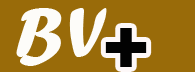
<style>
.page{position:relative;width:195px;height:72px;background:#996b09}
.page>*{position:absolute;margin:0}
.t1{font:72px "ForteMT";letter-spacing:0.083em;color:#fdfcf9}
.t2{font:72px "GillSans-UltraBold";letter-spacing:0.083em;color:#020202}
</style>
<div class="page">
<p class="t1" style="left:16px;top:8px;width:91px;height:58px">BV</p>
<p class="t2" style="left:105px;top:28px;width:42px;height:39px">+</p>
</div>
